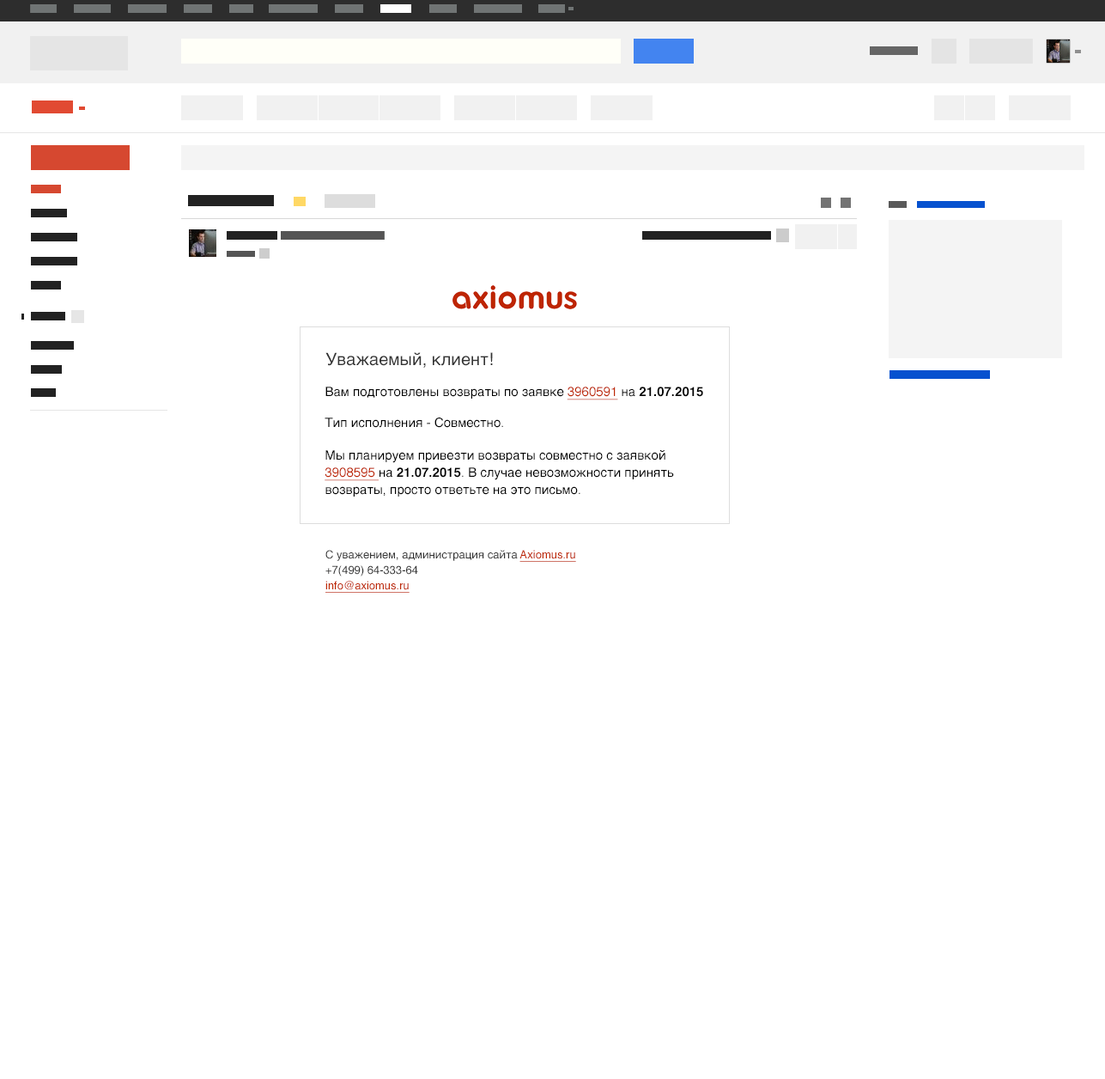
<style>
.page{position:relative;width:1105px;height:1079px;background:#ffffff}
.page>*{position:absolute;margin:0}
.t1{font:17.2px "Helvetica";color:#333333}
.t2{font:12.9px/17.2px "Helvetica";color:#000000}
.t3{font:12.9px/17.2px "Helvetica";color:#be2703;text-decoration:underline}
.t4{font:12.9px/17.2px "Helvetica-Bold";color:#000000}
.t5{font:12.9px/15.5px "Helvetica";color:#000000}
.t6{font:11.2px/15.5px "Helvetica";color:#333333}
.t7{font:11.2px/15.5px "Helvetica";color:#be2703;text-decoration:underline}
</style>
<div class="page">
<p class="t1" style="left:326px;top:352px;width:167px;height:16px">Уважаемый, клиент!</p>
<p class="t2" style="left:325px;top:386px;width:378px;height:110px">Вам подготовлены возвраты по заявке <span class="t3">3960591</span> на <span class="t4">21.07.2015<br><br></span><span class="t5">Тип исполнения - Совместно.<br><br></span>Мы планируем привезти возвраты совместно с заявкой <span class="t3">3908595 </span>на <span class="t4">21.07.2015</span>. В случае невозможности принять возвраты, просто ответьте на это письмо.</p>
<p class="t6" style="left:326px;top:550px;width:250px;height:43px">С уважением, администрация сайта <span class="t7">Axiomus.ru<br></span>+7(499) 64-333-64<br><span class="t7">info@axiomus.ru</span></p>
</div>
